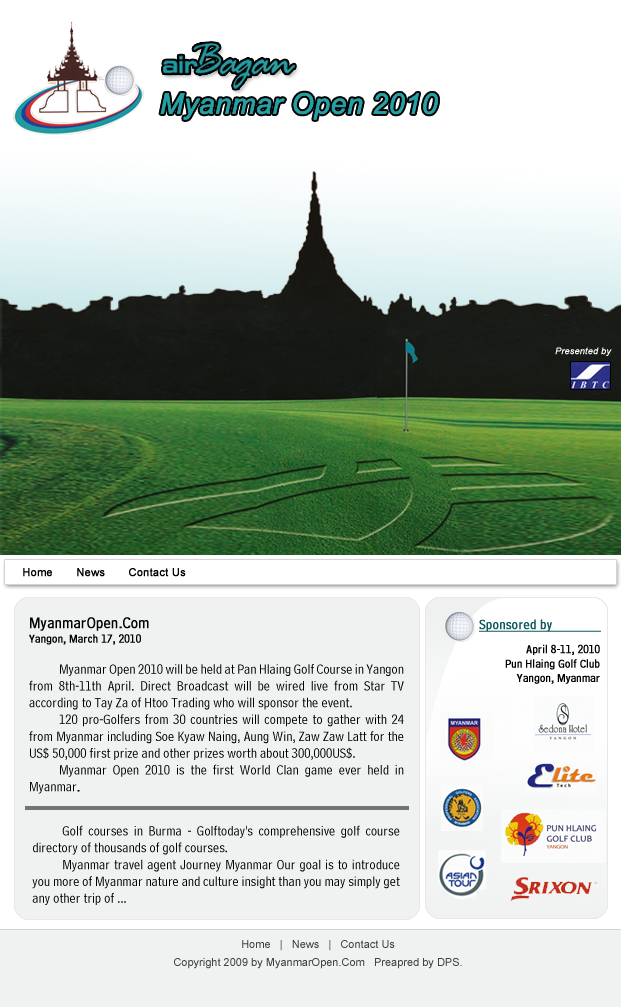
<style>
.page{position:relative;width:621px;height:1007px;background:#f0f2f2}
.page>*{position:absolute;margin:0}
.t1{font:28.3px "Arial-ItalicMT";color:#27a0a5;font-weight:bold}
.t2{font:9px "Arial-ItalicMT";color:#ffffff;font-weight:bold}
.t3{font:11px "ArialMT";color:#000000;font-weight:bold}
.t4{font:14px "BellCentennialBT-Address";color:#000000}
.t5{font:16px "BellCentennialBT-Address";color:#000000;font-weight:bold}
.t6{font:12px "BellCentennialBT-Address";color:#000000;font-weight:bold}
.t7{font:13px "BellCentennialBT-Address";color:#000000;font-weight:bold}
.t8{font:14px "BellCentennialBT-Address";color:#0b575d;font-weight:bold;text-decoration:underline}
.t9{font:11px/18px "ArialMT";color:#424242}
</style>
<div class="page">
<p class="t1" style="left:160px;top:92px;width:278px;height:28px">Myanmar Open 2010</p>
<p class="t2" style="left:555px;top:347px;width:57px;height:9px">Presented by</p>
<p class="t3" style="left:23px;top:568px;width:163px;height:9px">Home       News       Contact Us</p>
<p class="t4" style="left:29px;top:617px;width:375px;height:177px"><span class="t5">MyanmarOpen.Com<br></span><span class="t6">Yangon, March 17, 2010<br><br></span>Myanmar Open 2010 will be held at Pan Hlaing Golf Course in Yangon from 8th-11th April. Direct Broadcast will be wired live from Star TV according to Tay Za of Htoo Trading who will sponsor the event.<br>120 pro-Golfers from 30 countries will compete to gather with 24 from Myanmar including Soe Kyaw Naing, Aung Win, Zaw Zaw Latt for the US$ 50,000 first prize and other prizes worth about 300,000US$.<br>Myanmar Open 2010 is the first World Clan game ever held in Myanmar<span class="t7">.</span></p>
<p class="t8" style="left:479px;top:619px;width:122px;height:13px">Sponsored by</p>
<p class="t6" style="left:505px;top:644px;width:95px;height:40px;text-align:right">April 8-11, 2010<br>Pun Hlaing Golf Club<br>Yangon, Myanmar</p>
<p class="t4" style="left:32px;top:825px;width:368px;height:80px;text-align:justify">Golf courses in Burma - Golftoday's comprehensive golf course directory of thousands of golf courses.<br>Myanmar travel agent Journey Myanmar Our goal is to introduce you more of Myanmar nature and culture insight than you may simply get any other trip of ...<br><br>Myanmar Golf Club Pyay Rd., 9th Mile, Mayangon Tsp. Tel : (01) 661702. National Golf Training (Myanmar) Ltd. Thuwunna Sports Ground, Thingankyun Tsp. ...</p>
<p class="t9" style="left:174px;top:940px;width:288px;height:29px;text-align:center">Home   |   News   |   Contact Us<br>Copyright 2009 by MyanmarOpen.Com   Preapred by DPS.</p>
</div>
